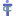
<style>
.page{position:relative;width:16px;height:16px;background:#ffffff}
.page>*{position:absolute;margin:0}
.t1{font:18.8px "Consolas-Bold";color:#5965b1}
.t2{font:10.5px "Consolas-Bold";color:#7a99ac}
.t3{font:14.7px "Consolas-Bold";color:#7e8ce6}
</style>
<div class="page">
<p class="t1" style="left:3px;top:3px;width:10px;height:13px">T</p>
<p class="t2" style="left:3px;top:5px;width:5px;height:7px">c</p>
<p class="t3" style="left:5px;top:0px;width:4px;height:3px">.</p>
<p class="t2" style="left:7px;top:5px;width:5px;height:7px">c</p>
</div>
